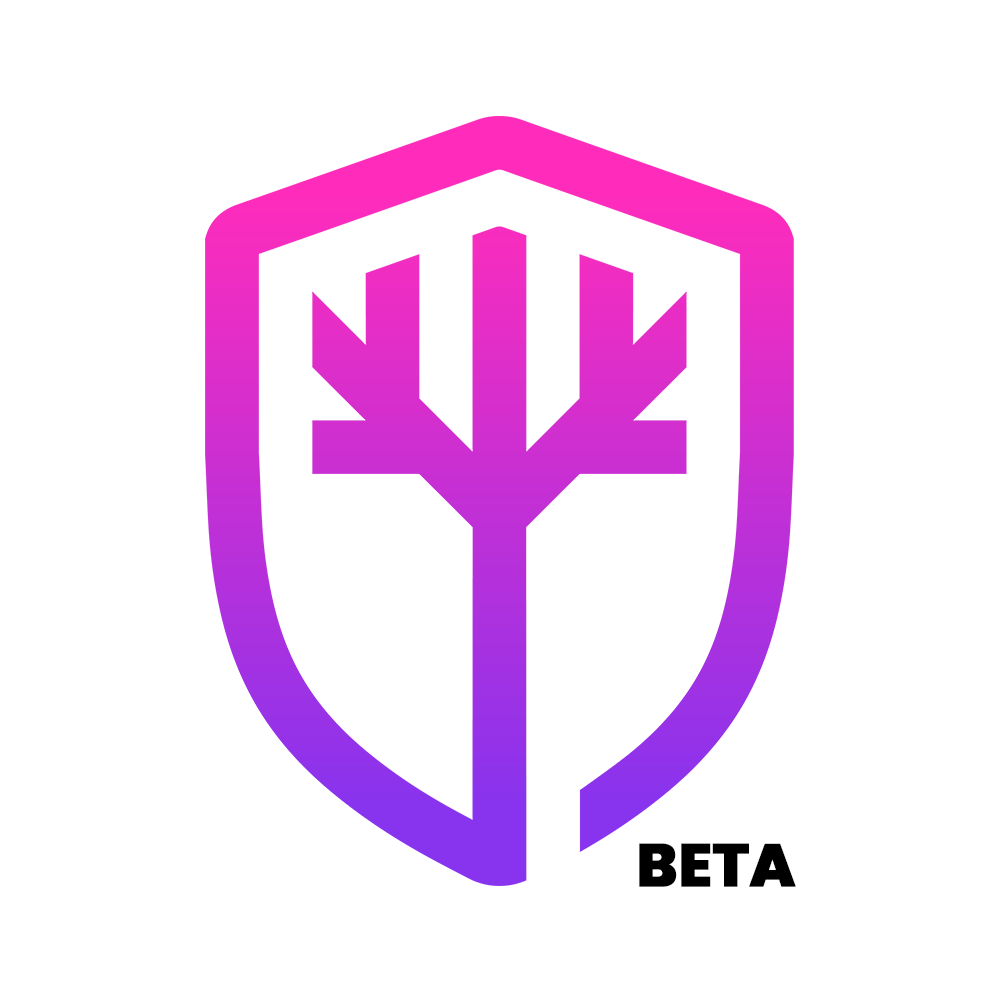
<style>
.page{position:relative;width:1000px;height:1000px;background:#ffffff}
.page>*{position:absolute;margin:0}
.t1{font:60px "Poppins-ExtraBold";color:#000000;font-weight:bold}
</style>
<div class="page">
<p class="t1" style="left:639px;top:843px;width:157px;height:44px">BETA</p>
</div>
